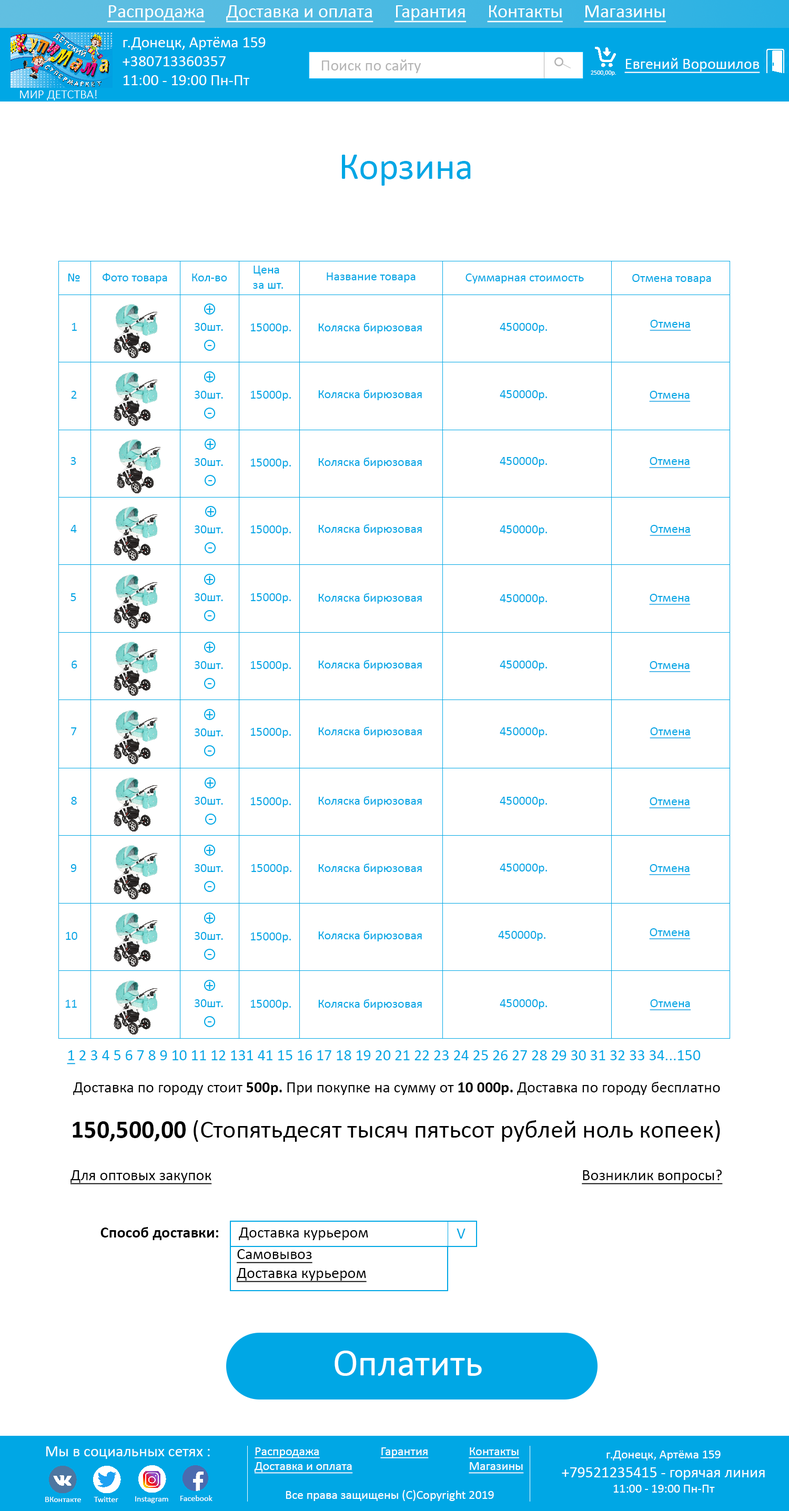
<style>
.page{position:relative;width:789px;height:1511px;background:#ffffff}
.page>*{position:absolute;margin:0}
.t1{font:18.9px "Calibri";color:#ffffff;text-decoration:underline}
.t2{font:15.8px "Calibri";color:#ffffff}
.t3{font:15.8px "Calibri";color:#b3b3b3}
.t4{font:15.8px "Calibri";color:#ffffff;text-decoration:underline}
.t5{font:6.3px "Calibri";color:#ffffff}
.t6{font:12.6px "Calibri-Light";color:#ffffff}
.t7{font:37.9px "Calibri";color:#00a7e5}
.t8{font:12.6px "Calibri";color:#00a7e5}
.t9{font:12.6px "Calibri";color:#00a7e5;text-decoration:underline}
.t10{font:15.8px "Calibri";color:#00a7e5}
.t11{font:15.8px "Calibri";color:#00a7e5;text-decoration:underline}
.t12{font:15.8px "Calibri";color:#000000}
.t13{font:15.8px "Calibri-Bold";color:#000000}
.t14{font:25.2px "Calibri";color:#000000}
.t15{font:25.2px "Calibri-Bold";color:#000000}
.t16{font:15.8px "Calibri";color:#000000;text-decoration:underline}
.t17{font:37.9px "Calibri";color:#ffffff}
.t18{font:12.6px "Calibri";color:#ffffff;text-decoration:underline}
.t19{font:12.6px "Calibri";color:#ffffff}
.t20{font:8.4px "Calibri";color:#ffffff}
</style>
<div class="page">
<p class="t1" style="left:107px;top:5px;width:559px;height:18px">Распродажа     Доставка и оплата     Гарантия     Контакты     Магазины</p>
<p class="t2" style="left:123px;top:37px;width:143px;height:48px">г.Донецк, Артёма 159<br>+380713360357<br>11:00 - 19:00 Пн-Пт</p>
<p class="t3" style="left:322px;top:59px;width:99px;height:14px">Поиск по сайту</p>
<p class="t4" style="left:624px;top:58px;width:136px;height:15px">Евгений Ворошилов</p>
<p class="t5" style="left:591px;top:70px;width:25px;height:6px">2500,00р.</p>
<p class="t6" style="left:20px;top:90px;width:77px;height:10px">МИР ДЕТСТВА!</p>
<p class="t7" style="left:342px;top:155px;width:129px;height:31px">Корзина</p>
<p class="t8" style="left:253px;top:266px;width:30px;height:23px">Цена <br>за шт.</p>
<p class="t8" style="left:68px;top:274px;width:12px;height:7px">№</p>
<p class="t8" style="left:103px;top:273px;width:64px;height:11px">Фото товара</p>
<p class="t8" style="left:192px;top:274px;width:35px;height:7px">Кол-во</p>
<p class="t8" style="left:327px;top:272px;width:89px;height:10px">Название товара</p>
<p class="t8" style="left:466px;top:274px;width:118px;height:10px">Суммарная стоимость</p>
<p class="t8" style="left:632px;top:274px;width:79px;height:10px">Отмена товара</p>
<p class="t8" style="left:72px;top:323px;width:5px;height:8px">1</p>
<p class="t8" style="left:195px;top:323px;width:28px;height:8px">30шт.</p>
<p class="t8" style="left:250px;top:324px;width:41px;height:9px">15000р.</p>
<p class="t8" style="left:318px;top:323px;width:104px;height:10px">Коляска бирюзовая</p>
<p class="t8" style="left:500px;top:323px;width:47px;height:10px">450000р.</p>
<p class="t9" style="left:650px;top:320px;width:41px;height:11px">Отмена</p>
<p class="t8" style="left:318px;top:390px;width:104px;height:10px">Коляска бирюзовая</p>
<p class="t8" style="left:71px;top:391px;width:6px;height:8px">2</p>
<p class="t8" style="left:195px;top:391px;width:28px;height:8px">30шт.</p>
<p class="t8" style="left:250px;top:391px;width:41px;height:10px">15000р.</p>
<p class="t8" style="left:500px;top:390px;width:47px;height:10px">450000р.</p>
<p class="t9" style="left:649px;top:391px;width:42px;height:11px">Отмена</p>
<p class="t8" style="left:70px;top:457px;width:6px;height:8px">3</p>
<p class="t8" style="left:195px;top:458px;width:28px;height:8px">30шт.</p>
<p class="t8" style="left:250px;top:459px;width:41px;height:10px">15000р.</p>
<p class="t8" style="left:318px;top:458px;width:104px;height:10px">Коляска бирюзовая</p>
<p class="t8" style="left:500px;top:457px;width:47px;height:10px">450000р.</p>
<p class="t9" style="left:649px;top:457px;width:42px;height:11px">Отмена</p>
<p class="t8" style="left:70px;top:525px;width:7px;height:8px">4</p>
<p class="t8" style="left:195px;top:525px;width:28px;height:8px">30шт.</p>
<p class="t8" style="left:250px;top:525px;width:41px;height:10px">15000р.</p>
<p class="t8" style="left:318px;top:524px;width:104px;height:11px">Коляска бирюзовая</p>
<p class="t8" style="left:500px;top:525px;width:47px;height:10px">450000р.</p>
<p class="t9" style="left:650px;top:525px;width:41px;height:11px">Отмена</p>
<p class="t8" style="left:70px;top:593px;width:6px;height:8px">5</p>
<p class="t8" style="left:195px;top:593px;width:28px;height:8px">30шт.</p>
<p class="t8" style="left:250px;top:593px;width:41px;height:10px">15000р.</p>
<p class="t8" style="left:318px;top:593px;width:104px;height:11px">Коляска бирюзовая</p>
<p class="t9" style="left:649px;top:594px;width:42px;height:11px">Отмена</p>
<p class="t8" style="left:500px;top:594px;width:47px;height:10px">450000р.</p>
<p class="t8" style="left:72px;top:661px;width:5px;height:8px">6</p>
<p class="t8" style="left:195px;top:661px;width:28px;height:8px">30шт.</p>
<p class="t8" style="left:250px;top:661px;width:41px;height:10px">15000р.</p>
<p class="t8" style="left:318px;top:660px;width:104px;height:11px">Коляска бирюзовая</p>
<p class="t8" style="left:500px;top:661px;width:47px;height:10px">450000р.</p>
<p class="t9" style="left:649px;top:661px;width:42px;height:11px">Отмена</p>
<p class="t8" style="left:71px;top:727px;width:6px;height:8px">7</p>
<p class="t8" style="left:195px;top:729px;width:28px;height:7px">30шт.</p>
<p class="t8" style="left:250px;top:728px;width:41px;height:10px">15000р.</p>
<p class="t8" style="left:318px;top:727px;width:104px;height:10px">Коляска бирюзовая</p>
<p class="t8" style="left:500px;top:727px;width:47px;height:10px">450000р.</p>
<p class="t9" style="left:650px;top:727px;width:41px;height:12px">Отмена</p>
<p class="t8" style="left:71px;top:797px;width:6px;height:8px">8</p>
<p class="t8" style="left:195px;top:797px;width:28px;height:8px">30шт.</p>
<p class="t8" style="left:250px;top:797px;width:41px;height:10px">15000р.</p>
<p class="t8" style="left:318px;top:796px;width:104px;height:11px">Коляска бирюзовая</p>
<p class="t8" style="left:500px;top:797px;width:47px;height:10px">450000р.</p>
<p class="t9" style="left:649px;top:797px;width:42px;height:11px">Отмена</p>
<p class="t8" style="left:70px;top:864px;width:6px;height:8px">9</p>
<p class="t8" style="left:195px;top:864px;width:28px;height:8px">30шт.</p>
<p class="t8" style="left:251px;top:864px;width:40px;height:10px">15000р.</p>
<p class="t8" style="left:318px;top:864px;width:104px;height:10px">Коляска бирюзовая</p>
<p class="t8" style="left:500px;top:864px;width:47px;height:10px">450000р.</p>
<p class="t9" style="left:649px;top:864px;width:42px;height:11px">Отмена</p>
<p class="t9" style="left:649px;top:928px;width:42px;height:11px">Отмена</p>
<p class="t8" style="left:66px;top:932px;width:11px;height:8px">10</p>
<p class="t8" style="left:195px;top:932px;width:28px;height:8px">30шт.</p>
<p class="t8" style="left:250px;top:933px;width:41px;height:10px">15000р.</p>
<p class="t8" style="left:318px;top:931px;width:104px;height:11px">Коляска бирюзовая</p>
<p class="t8" style="left:498px;top:931px;width:47px;height:10px">450000р.</p>
<p class="t8" style="left:65px;top:1000px;width:12px;height:8px">11</p>
<p class="t8" style="left:195px;top:999px;width:28px;height:8px">30шт.</p>
<p class="t8" style="left:250px;top:1000px;width:41px;height:10px">15000р.</p>
<p class="t8" style="left:318px;top:999px;width:104px;height:11px">Коляска бирюзовая</p>
<p class="t8" style="left:500px;top:999px;width:47px;height:10px">450000р.</p>
<p class="t9" style="left:650px;top:999px;width:41px;height:11px">Отмена</p>
<p class="t10" style="left:67px;top:1050px;width:634px;height:15px"><span class="t11">1</span> 2 3 4 5 6 7 8 9 10 11 12 131 41 15 16 17 18 19 20 21 22 23 24 25 26 27 28 29 30 31 32 33 34...150</p>
<p class="t12" style="left:73px;top:1082px;width:647px;height:13px">Доставка по городу стоит <span class="t13">500р.</span> При покупке на сумму от <span class="t13">10 000р.</span> Доставка по городу бесплатно</p>
<p class="t14" style="left:73px;top:1120px;width:647px;height:22px"><span class="t15">150,500,00</span> (Стопятьдесят тысяч пятьсот рублей ноль копеек)</p>
<p class="t16" style="left:582px;top:1170px;width:141px;height:15px">Возниклик вопросы?</p>
<p class="t16" style="left:70px;top:1170px;width:142px;height:15px">Для оптовых закупок</p>
<p class="t13" style="left:100px;top:1227px;width:118px;height:13px">Способ доставки:</p>
<p class="t12" style="left:239px;top:1228px;width:129px;height:12px">Доставка курьером</p>
<p class="t10" style="left:457px;top:1229px;width:9px;height:10px">V</p>
<p class="t16" style="left:237px;top:1249px;width:130px;height:33px">Самовывоз<br>Доставка курьером</p>
<p class="t17" style="left:335px;top:1351px;width:147px;height:25px">Оплатить</p>
<p class="t2" style="left:46px;top:1447px;width:164px;height:12px">Мы в социальных сетях :</p>
<p class="t18" style="left:254px;top:1448px;width:99px;height:26px">Распродажа<br>Доставка и оплата</p>
<p class="t18" style="left:380px;top:1448px;width:49px;height:11px">Гарантия</p>
<p class="t18" style="left:469px;top:1448px;width:55px;height:26px">Контакты<br>Магазины</p>
<p class="t2" style="left:562px;top:1451px;width:203px;height:42px;text-align:center"><span class="t19">г.Донецк, Артёма 159<br></span>+79521235415 - горячая линия<br><span class="t19">11:00 - 19:00 Пн-Пт</span></p>
<p class="t19" style="left:286px;top:1490px;width:208px;height:11px">Все права защищены (С)Copyright 2019</p>
<p class="t20" style="left:45px;top:1497px;width:36px;height:5px">ВКонтакте</p>
<p class="t20" style="left:94px;top:1497px;width:24px;height:5px">Twitter</p>
<p class="t20" style="left:135px;top:1497px;width:33px;height:6px">Instagram</p>
<p class="t20" style="left:180px;top:1495px;width:33px;height:6px">Facebook</p>
</div>
